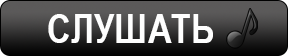
<style>
.page{position:relative;width:288px;height:56px}
.page>*{position:absolute;margin:0}
.t1{font:40.2px "ArialNarrow-Bold";color:#fefefe}
</style>
<div class="page">
<p class="t1" style="left:48px;top:14px;width:165px;height:29px">СЛУШАТЬ</p>
</div>
